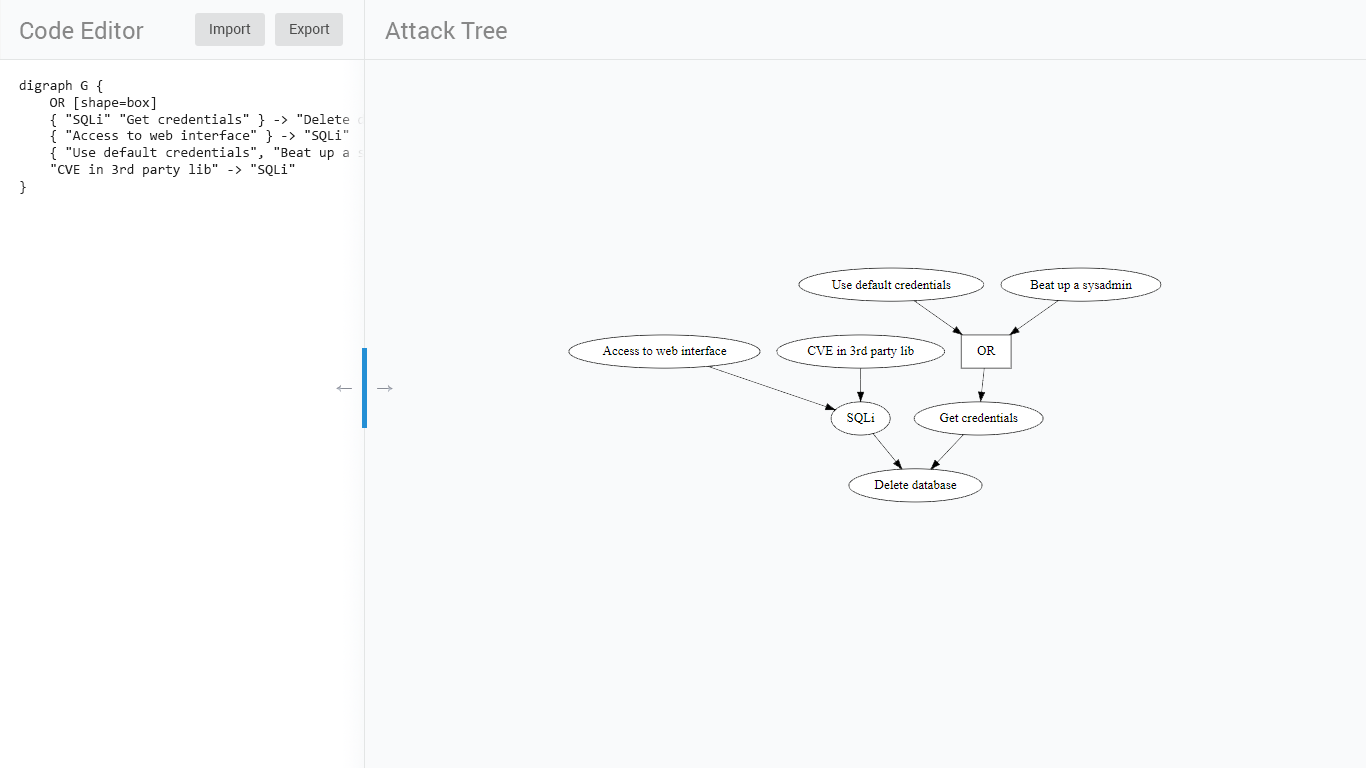
<style>
.page{position:relative;width:1366px;height:768px;background:#f9fafb}
.page>*{position:absolute;margin:0}
.t1{font:24px "Roboto-Regular";color:#888888}
.t2{font:14px "Roboto-Regular";color:#4c4c4c}
.t3{font:14px "Consolas";color:#202020}
</style>
<div class="page">
<p class="t1" style="left:20px;top:21px;width:124px;height:18px">Code Editor</p>
<p class="t2" style="left:210px;top:24px;width:41px;height:13px">Import</p>
<p class="t2" style="left:290px;top:24px;width:40px;height:13px">Export</p>
<p class="t1" style="left:385px;top:21px;width:122px;height:18px">Attack Tree</p>
<p class="t3" style="left:19px;top:80px;width:645px;height:114px">digraph G {<br>    OR [shape=box]<br>    { "SQLi" "Get credentials" } -&gt; "Delete database"<br>    { "Access to web interface" } -&gt; "SQLi"<br>    { "Use default credentials", "Beat up a sysadmin" } -&gt; "OR" -&gt; "Get credentials"<br>    "CVE in 3rd party lib" -&gt; "SQLi"<br>}</p>
</div>
